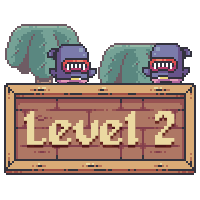
<style>
.page{position:relative;width:200px;height:200px;background:#ffffff}
.page>*{position:absolute;margin:0}
.t1{font:48px "Alagard";letter-spacing:-0.02em;color:#ebd9a1;font-weight:bold}
</style>
<div class="page">
<p class="t1" style="left:24px;top:111px;width:151px;height:34px">Level 2</p>
</div>
